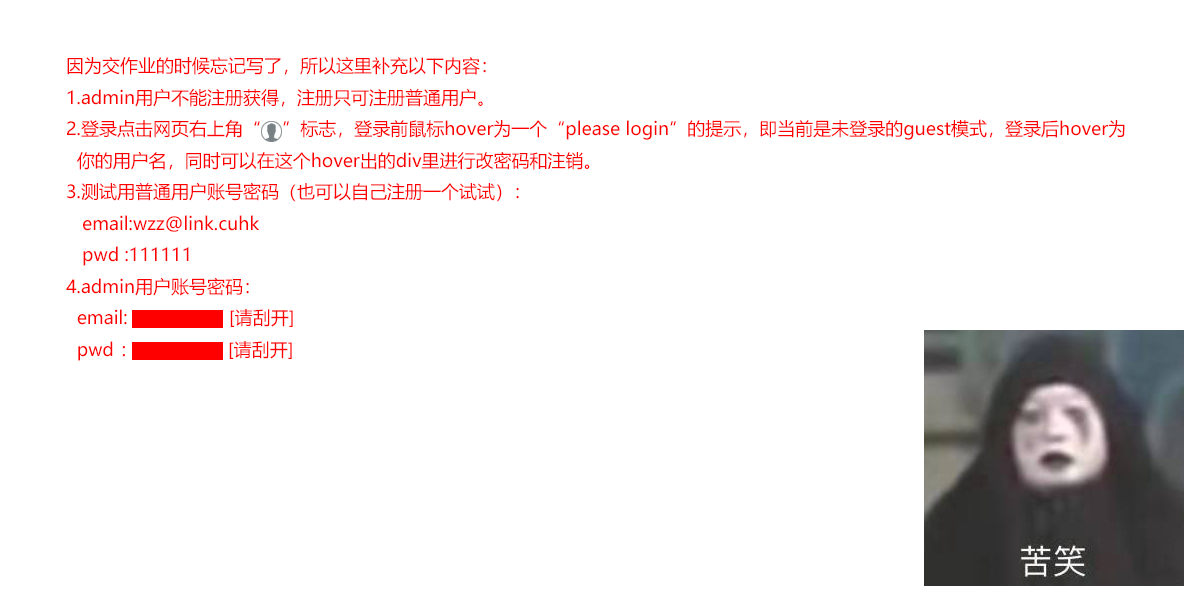
<style>
.page{position:relative;width:1200px;height:600px;background:#ffffff}
.page>*{position:absolute;margin:0}
.t1{font:18px "MicrosoftYaHei";color:#ff0000}
</style>
<div class="page">
<p class="t1" style="left:66px;top:57px;width:1059px;height:304px">因为交作业的时候忘记写了，所以这里补充以下内容：<br>1.admin用户不能注册获得，注册只可注册普通用户。<br>2.登录点击网页右上角“    ”标志，登录前鼠标hover为一个“please login”的提示，即当前是未登录的guest模式，登录后hover为<br>  你的用户名，同时可以在这个hover出的div里进行改密码和注销。<br>3.测试用普通用户账号密码（也可以自己注册一个试试）：<br>   email:wzz@link.cuhk<br>   pwd :111111<br>4.admin用户账号密码：<br>  email:                   [请刮开]<br>  pwd ：                 [请刮开]</p>
</div>
